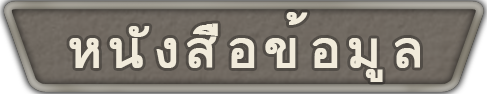
<style>
.page{position:relative;width:487px;height:94px}
.page>*{position:absolute;margin:0}
.t1{font:52.1px "Loma";letter-spacing:0.075em;color:#f1ebdb;text-transform:uppercase;font-weight:bold}
</style>
<div class="page">
<p class="t1" style="left:69px;top:12px;width:351px;height:70px">หนังสือข้อมูล</p>
</div>
